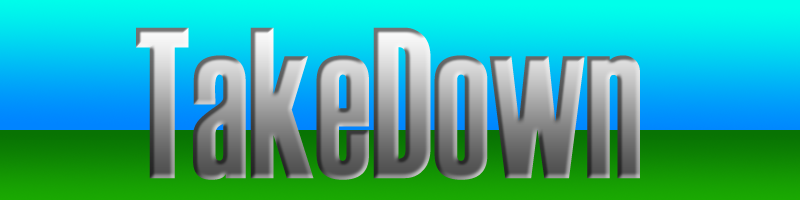
<style>
.page{position:relative;width:800px;height:200px}
.page>*{position:absolute;margin:0}
.t1{font:214.6px "Haettenschweiler";scale:0.75 1}
</style>
<div class="page">
<p class="t1" style="left:136px;top:27px;width:504px;height:153px">TakeDown</p>
</div>
